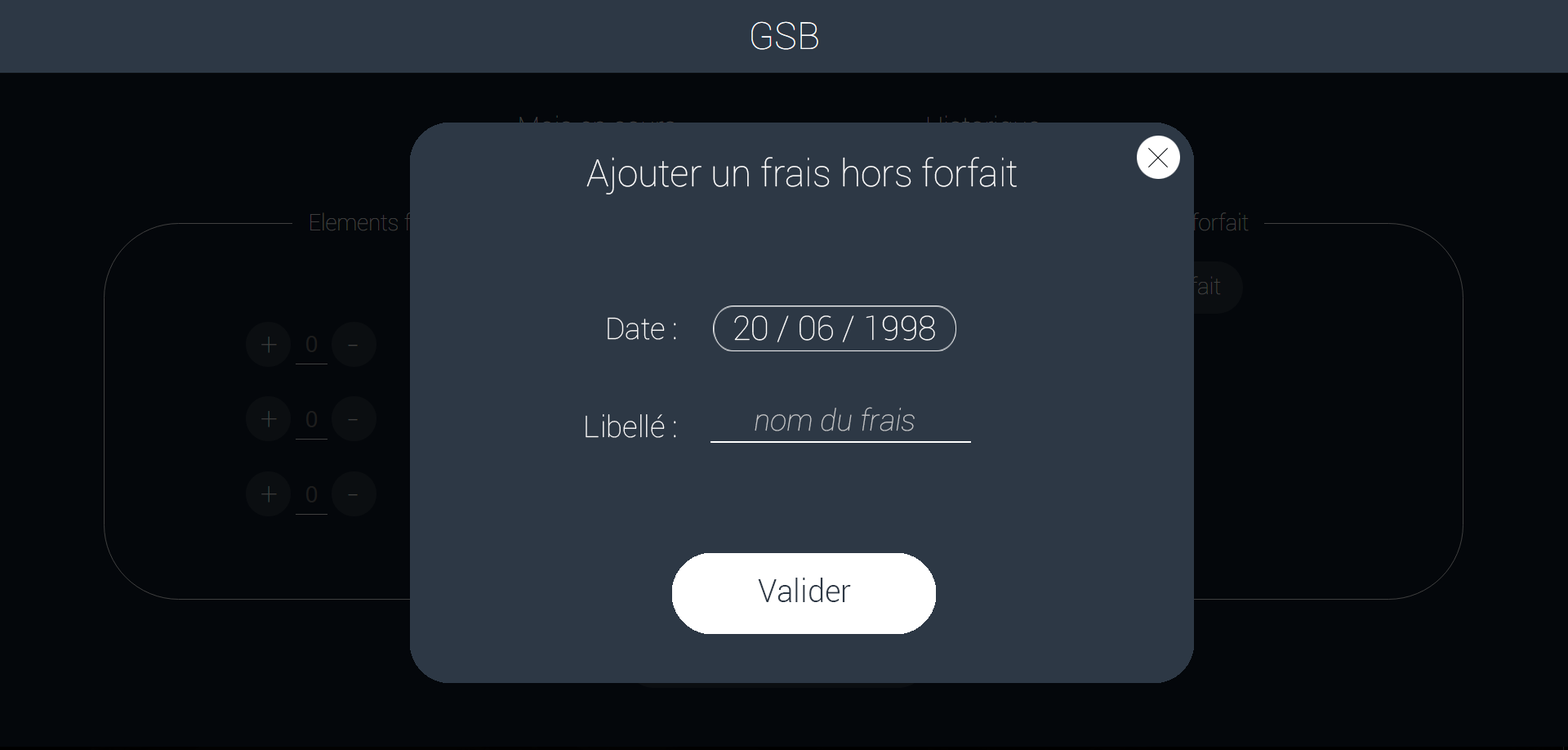
<style>
.page{position:relative;width:1568px;height:750px;background:#04070b}
.page>*{position:absolute;margin:0}
.t1{font:37.6px "Roboto-Thin";color:#ffffff}
.t2{font:29.8px "Roboto-Thin";color:#ffffff}
.t3{font:33.4px "Roboto-Thin";color:#ffffff}
.t4{font:29.8px "Roboto-ThinItalic";color:#c7c9cb}
.t5{font:31px "Roboto-Light";color:#2d3845}
</style>
<div class="page">
<p class="t1" style="left:586px;top:157px;width:431px;height:37px">Ajouter un frais hors forfait</p>
<p class="t2" style="left:608px;top:317px;width:68px;height:23px">Date :</p>
<p class="t3" style="left:734px;top:315px;width:201px;height:27px">20 / 06 / 1998</p>
<p class="t4" style="left:755px;top:407px;width:160px;height:24px">nom du frais</p>
<p class="t2" style="left:586px;top:414px;width:90px;height:24px">Libellé :</p>
<p class="t5" style="left:758px;top:577px;width:93px;height:25px">Valider</p>
</div>
